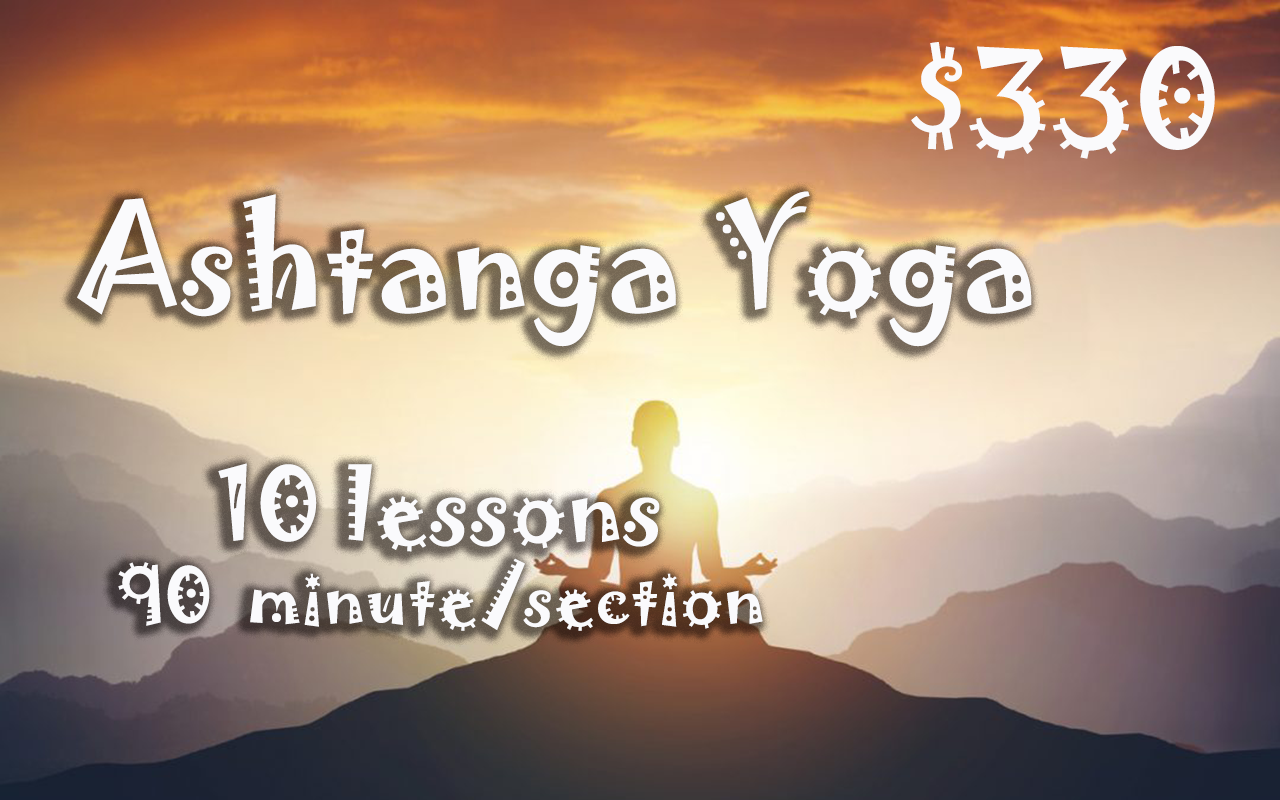
<style>
.page{position:relative;width:1280px;height:800px}
.page>*{position:absolute;margin:0}
.t1{font:122.3px "Jokerman-Regular";letter-spacing:0.005em;color:#fafafc}
.t2{font:129.5px "Jokerman-Regular";letter-spacing:0.005em;color:#fafafc}
.t3{font:68.4px "Jokerman-Regular";letter-spacing:0.005em;color:#fafafc}
.t4{font:114px "Jokerman-Regular";letter-spacing:0.005em;color:#fafafc}
.t5{font:91.2px "Jokerman-Regular";letter-spacing:0.005em;color:#fafafc}
</style>
<div class="page">
<p class="t1" style="left:911px;top:42px;width:304px;height:117px">$330</p>
<p class="t2" style="left:77px;top:191px;width:955px;height:156px">Ashtanga Yoga</p>
<p class="t3" style="left:118px;top:463px;width:645px;height:168px;text-align:center"><span class="t4"> <br></span><span class="t5">10 lessons<br></span>90  minute/section</p>
</div>
